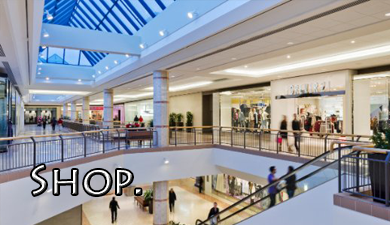
<style>
.page{position:relative;width:390px;height:225px}
.page>*{position:absolute;margin:0}
.t1{font:40px "LithosPro-Regular"}
</style>
<div class="page">
<p class="t1" style="left:32px;top:165px;width:109px;height:30px">Shop.</p>
</div>
